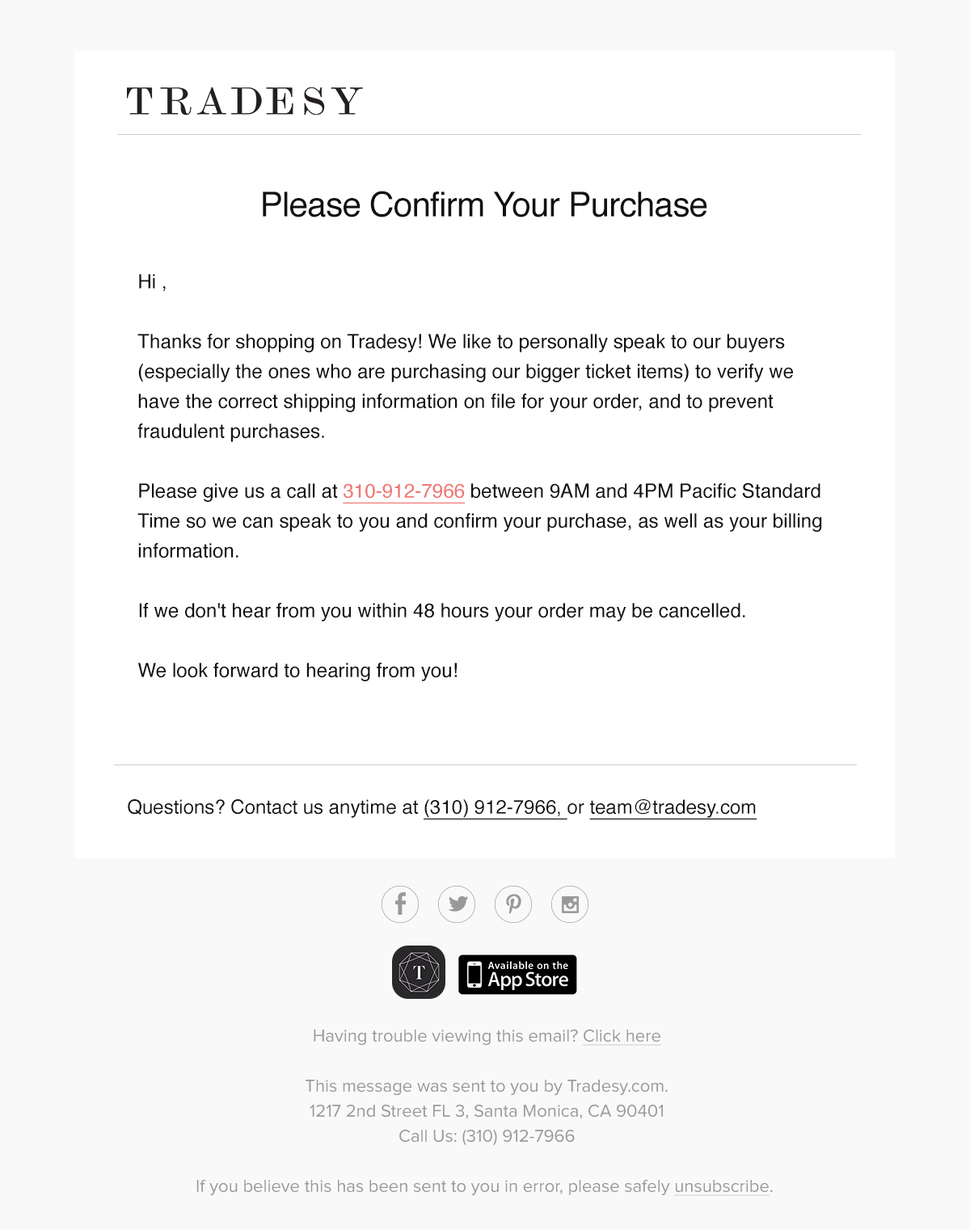
<style>
.page{position:relative;width:970px;height:1230px;background:#ffffff}
.page>*{position:absolute;margin:0}
.t1{font:34.3px "Helvetica";letter-spacing:-0.02em;color:#111111}
.t2{font:19.5px/29.9px "Helvetica";color:#111111}
.t3{font:19.5px/29.9px "Helvetica";color:#ee7873;text-decoration:underline}
.t4{font:19.4px "Helvetica";color:#111111}
.t5{font:19.4px "Helvetica";color:#111111;text-decoration:underline}
.t6{font:17.8px/25px "ProximaNova-Regular";color:#999999}
.t7{font:17.8px/25px "ProximaNova-Regular";color:#999999;text-decoration:underline}
</style>
<div class="page">
<p class="t1" style="left:263px;top:191px;width:444px;height:26px">Please Confirm Your Purchase</p>
<p class="t2" style="left:137px;top:274px;width:685px;height:407px">Hi ,<br><br>Thanks for shopping on Tradesy! We like to personally speak to our buyers (especially the ones who are purchasing our bigger ticket items) to verify we have the correct shipping information on file for your order, and to prevent fraudulent purchases.<br><br>Please give us a call at <span class="t3">310-912-7966</span> between 9AM and 4PM Pacific Standard Time so we can speak to you and confirm your purchase, as well as your billing information.<br><br>If we don't hear from you within 48 hours your order may be cancelled.<br><br>We look forward to hearing from you!</p>
<p class="t4" style="left:128px;top:799px;width:629px;height:20px">Questions? Contact us anytime at <span class="t5">(310) 912-7966, </span>or <span class="t5">team@tradesy.com</span></p>
<p class="t6" style="left:196px;top:1029px;width:576px;height:167px;text-align:center">Having trouble viewing this email? <span class="t7">Click here<br></span><br>This message was sent to you by Tradesy.com.<br>1217 2nd Street FL 3, Santa Monica, CA 90401<br>Call Us: (310) 912-7966<br><br>If you believe this has been sent to you in error, please safely <span class="t7">unsubscribe</span>.</p>
</div>
